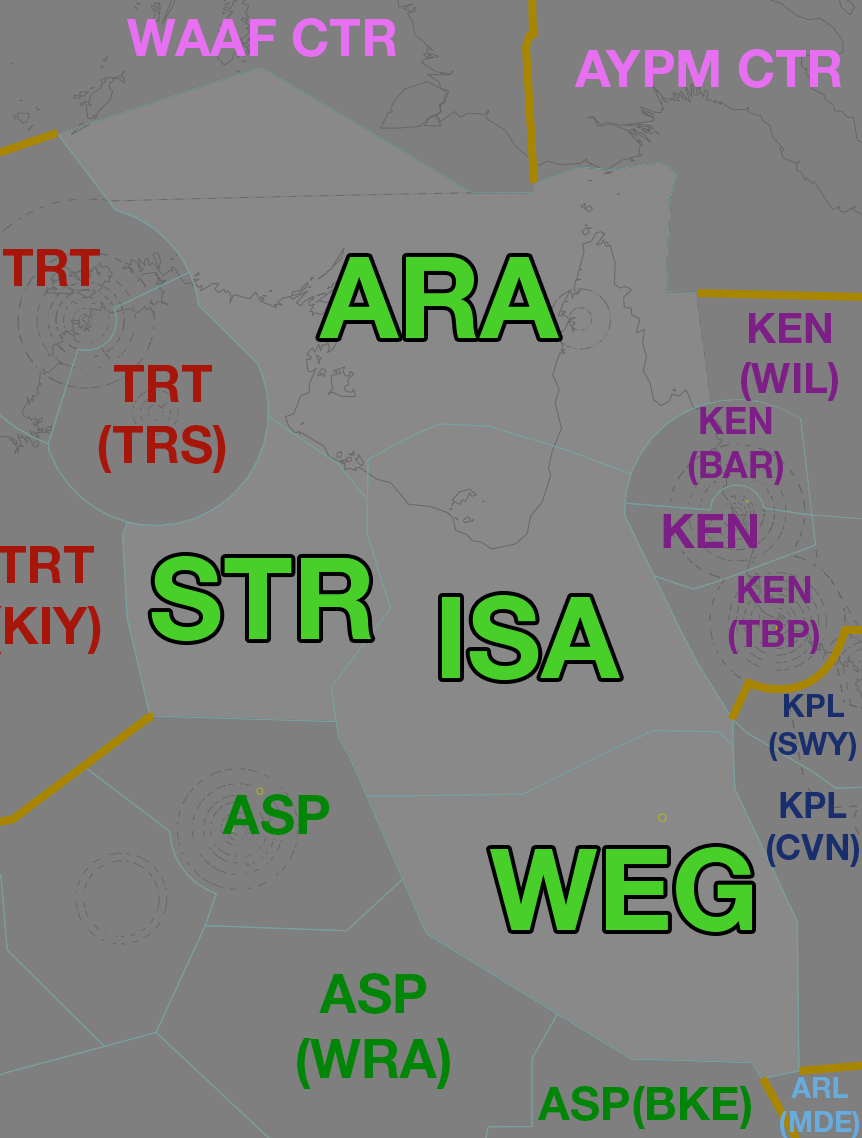
<style>
.page{position:relative;width:862px;height:1138px;background:#7f7f7f}
.page>*{position:absolute;margin:0}
.t1{font:51.8px "HelveticaNeueLTStd-Bd";color:#e670f1}
.t2{font:51.4px "HelveticaNeueLTStd-Bd";color:#a7160b}
.t3{font:114px "HelveticaNeueLTStd-Bd";color:#48cf29}
.t4{font:41.8px "HelveticaNeueLTStd-Bd";color:#7e1e87}
.t5{font:36.5px "HelveticaNeueLTStd-Bd";color:#7e1e87}
.t6{font:48px "HelveticaNeueLTStd-Bd";color:#7e1e87}
.t7{font:31.6px "HelveticaNeueLTStd-Bd";color:#182e6d}
.t8{font:54px "HelveticaNeueLTStd-Bd";color:#008506}
.t9{font:35.1px "HelveticaNeueLTStd-Bd";color:#182e6d}
.t10{font:46.1px "HelveticaNeueLTStd-Bd";color:#008506}
.t11{font:28.5px "HelveticaNeueLTStd-Bd";color:#67acdc}
</style>
<div class="page">
<p class="t1" style="left:127px;top:18px;width:269px;height:39px">WAAF CTR</p>
<p class="t1" style="left:574px;top:49px;width:267px;height:39px">AYPM CTR</p>
<p class="t2" style="left:3px;top:249px;width:97px;height:37px">TRT</p>
<p class="t3" style="left:319px;top:256px;width:240px;height:82px">ARA</p>
<p class="t4" style="left:741px;top:313px;width:97px;height:88px;text-align:center">KEN<br>(WIL)</p>
<p class="t2" style="left:98px;top:365px;width:128px;height:108px;text-align:center">TRT<br>(TRS)</p>
<p class="t5" style="left:688px;top:407px;width:95px;height:78px;text-align:center">KEN<br>(BAR)</p>
<p class="t6" style="left:663px;top:514px;width:94px;height:34px">KEN</p>
<p class="t3" style="left:151px;top:555px;width:221px;height:87px">STR</p>
<p class="t5" style="left:728px;top:576px;width:91px;height:78px;text-align:center">KEN<br>(TBP)</p>
<p class="t3" style="left:442px;top:594px;width:178px;height:87px">ISA</p>
<p class="t7" style="left:769px;top:694px;width:87px;height:67px;text-align:center">KPL<br>(SWY)</p>
<p class="t8" style="left:222px;top:794px;width:108px;height:41px">ASP</p>
<p class="t9" style="left:767px;top:792px;width:92px;height:75px;text-align:center">KPL<br>(CVN)</p>
<p class="t3" style="left:490px;top:847px;width:262px;height:85px">WEG</p>
<p class="t8" style="left:297px;top:973px;width:153px;height:116px;text-align:center">ASP<br>(WRA)</p>
<p class="t10" style="left:537px;top:1086px;width:214px;height:43px">ASP(BKE)</p>
<p class="t11" style="left:780px;top:1077px;width:79px;height:61px;text-align:center">ARL<br>(MDE)</p>
</div>
